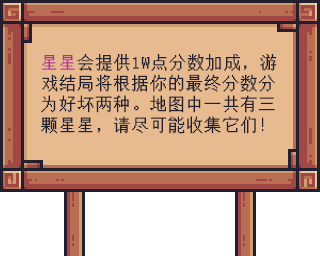
<style>
.page{position:relative;width:320px;height:256px;background:#e7bb8f}
.page>*{position:absolute;margin:0}
.t1{font:16.7px/20.8px "FZXS16--GB1-0";letter-spacing:0.06em;color:#211f30;font-weight:bold}
.t2{font:16.7px/20.8px "FZXS16--GB1-0";letter-spacing:0.06em;color:#b82b9f;font-weight:bold}
</style>
<div class="page">
<p class="t1" style="left:41px;top:54px;width:236px;height:80px"><span class="t2">星星</span>会提供1W点分数加成，游戏结局将根据你的最终分数分为好坏两种。地图中一共有三颗星星，请尽可能收集它们！</p>
</div>
